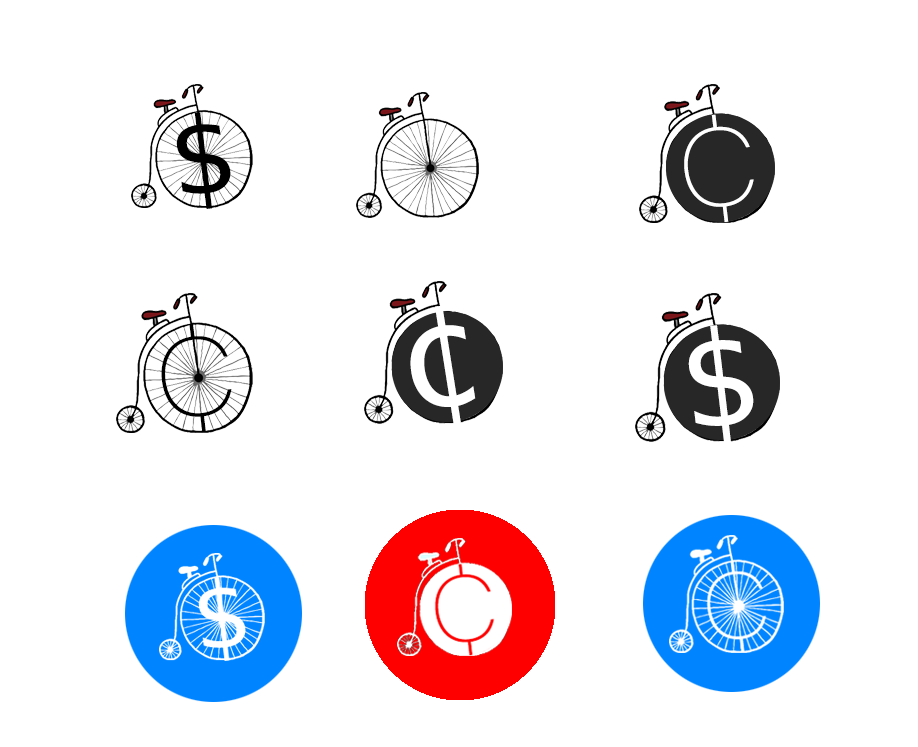
<style>
.page{position:relative;width:918px;height:747px;background:#ffffff}
.page>*{position:absolute;margin:0}
.t1{font:106.7px "BitstreamVeraSansMono-Roman";letter-spacing:0.08em;color:#000000;scale:1.04 1}
.t2{font:167.8px "AcuminConcept-Thin";letter-spacing:0.08em;color:#ffffff}
.t3{font:142px "BitstreamVeraSansMono-Roman";letter-spacing:0.08em;color:#ffffff}
.t4{font:169px "AcuminConcept-Thin";letter-spacing:0.08em;color:#000000}
.t5{font:131.9px "BitstreamVeraSansMono-Roman";letter-spacing:0.08em;color:#ffffff}
</style>
<div class="page">
<p class="t1" style="left:176px;top:112px;width:55px;height:97px;rotate:-7deg">$</p>
<p class="t2" style="left:684px;top:114px;width:70px;height:108px;rotate:-7deg">¢</p>
<p class="t3" style="left:410px;top:305px;width:66px;height:122px;rotate:-9deg">¢</p>
<p class="t4" style="left:161px;top:323px;width:71px;height:109px;rotate:-7deg">¢</p>
<p class="t5" style="left:688px;top:325px;width:66px;height:120px;rotate:-7deg">$</p>
</div>
